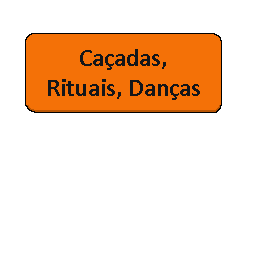
<style>
.page{position:relative;width:256px;height:256px;background:#ffffff}
.page>*{position:absolute;margin:0}
.t1{font:25px "Calibri-Bold";color:#141619}
</style>
<div class="page">
<p class="t1" style="left:48px;top:49px;width:152px;height:51px;text-align:center">Caçadas, Rituais, Danças</p>
</div>
